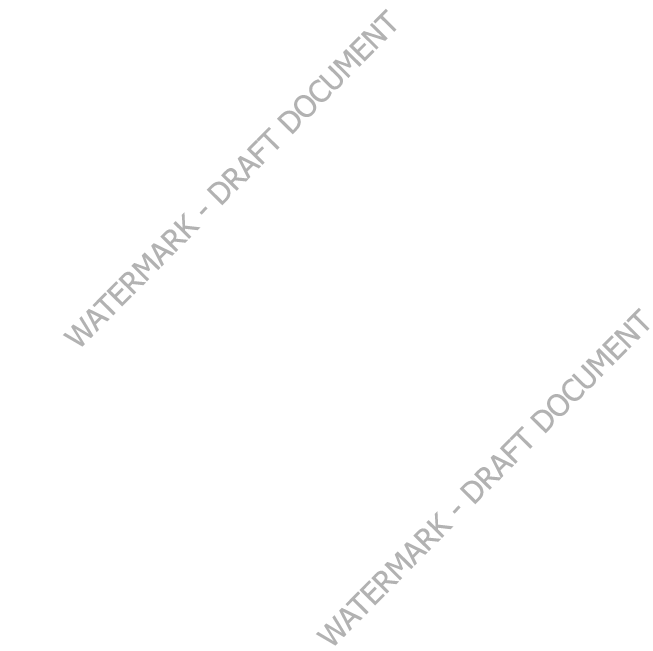
<style>
.page{position:relative;width:653px;height:651px;background:#ffffff}
.page>*{position:absolute;margin:0}
.t1{font:30px "Tahoma";color:#b2b2b2}
</style>
<div class="page">
<p class="t1" style="left:62px;top:8px;width:335px;height:339px;rotate:-45deg">WATERMARK - DRAFT DOCUMENT</p>
<p class="t1" style="left:315px;top:307px;width:335px;height:339px;rotate:-45deg">WATERMARK - DRAFT DOCUMENT</p>
</div>
